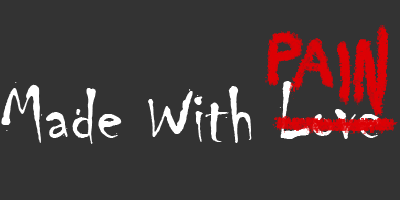
<style>
.page{position:relative;width:400px;height:200px;background:#333333}
.page>*{position:absolute;margin:0}
.t1{font:79.6px "Chiller-Regular";color:#ffffff}
</style>
<div class="page">
<p class="t1" style="left:1px;top:81px;width:381px;height:63px">Made With Love</p>
</div>
